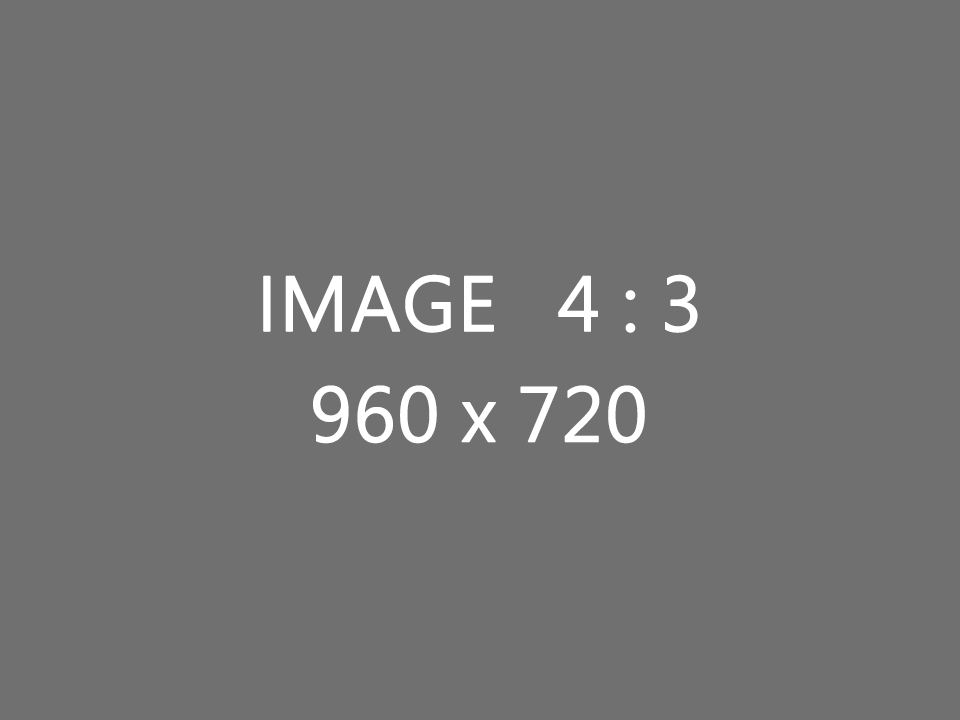
<style>
.page{position:relative;width:960px;height:720px;background:#707070}
.page>*{position:absolute;margin:0}
.t1{font:72px "MicrosoftJhengHeiRegular";color:#ffffff;font-weight:bold}
</style>
<div class="page">
<p class="t1" style="left:263px;top:274px;width:435px;height:59px">IMAGE   4 : 3</p>
<p class="t1" style="left:313px;top:385px;width:332px;height:59px">960 x 720</p>
</div>
